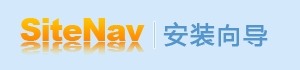
<style>
.page{position:relative;width:300px;height:70px;background:#d3e9fb}
.page>*{position:absolute;margin:0}
.t1{font:31px "Arial-Black";letter-spacing:-0.04em;color:#ffa100}
.t2{font:24px "MicrosoftYaHei";letter-spacing:0.08em;color:#5495cc;font-weight:bold}
.t3{font:18.5px "Arial-Black";letter-spacing:-0.04em;scale:1.68 1}
</style>
<div class="page">
<p class="t1" style="left:20px;top:18px;width:125px;height:23px">SiteNav</p>
<p class="t2" style="left:163px;top:22px;width:105px;height:25px">安装向导</p>
<p class="t3" style="left:20px;top:42px;width:125px;height:13px">SiteNav</p>
</div>
